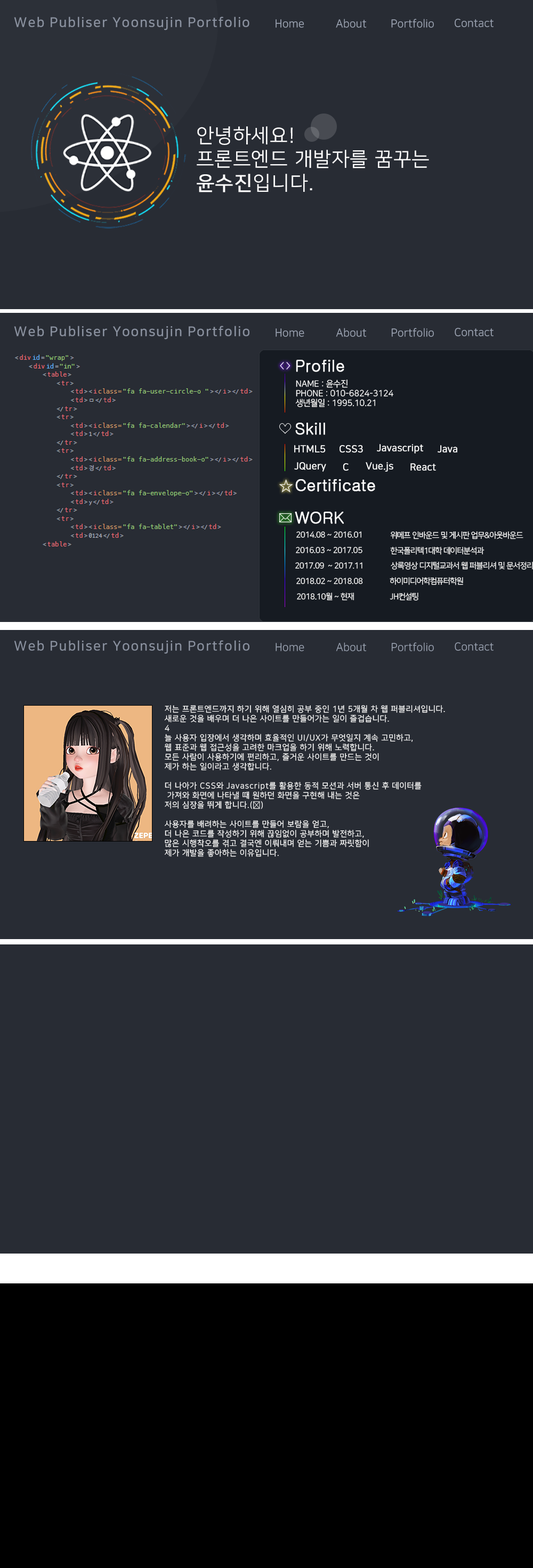
<style>
.page{position:relative;width:533px;height:1568px;background:#282c34}
.page>*{position:absolute;margin:0}
.t1{font:13.3px "NanumSquare_acB";letter-spacing:0.075em;color:#8a919f}
.t2{font:11.1px "NanumSquare_acR";color:#9da5b4}
.t3{font:19.7px "NanumSquare_acR";letter-spacing:0.075em;color:#ffffff}
.t4{font:19.7px "NanumSquare_acR";letter-spacing:0.075em;color:#ffffff;font-weight:bold}
.t5{font:16px "Gulim";color:#ffffff;font-weight:bold}
.t6{font:8.5px/9.6px "NanumSquare_acR";color:#ffffff}
.t7{font:9.6px "NanumSquare_acR";color:#ffffff;font-weight:bold}
.t8{font:16px "BinggraeMelona";color:#ffffff}
.t9{font:8px "NanumSquare_acR";letter-spacing:-0.025em;color:#ffffff}
.t10{font:8px "NanumSquare_acR";letter-spacing:0.075em;color:#ffffff}
</style>
<div class="page">
<p class="t1" style="left:14px;top:17px;width:235px;height:13px">Web Publiser Yoonsujin Portfolio</p>
<p class="t2" style="left:276px;top:19px;width:28px;height:9px">Home</p>
<p class="t2" style="left:336px;top:19px;width:30px;height:9px">About</p>
<p class="t2" style="left:391px;top:19px;width:43px;height:9px">Portfolio</p>
<p class="t2" style="left:455px;top:19px;width:39px;height:8px">Contact</p>
<p class="t3" style="left:197px;top:126px;width:232px;height:66px">안녕하세요!<br>프론트엔드 개발자를 꿈꾸는<br><span class="t4">윤수진</span>입니다.</p>
<p class="t1" style="left:14px;top:326px;width:235px;height:14px">Web Publiser Yoonsujin Portfolio</p>
<p class="t2" style="left:276px;top:328px;width:28px;height:9px">Home</p>
<p class="t2" style="left:336px;top:328px;width:30px;height:9px">About</p>
<p class="t2" style="left:391px;top:328px;width:43px;height:9px">Portfolio</p>
<p class="t2" style="left:455px;top:328px;width:39px;height:8px">Contact</p>
<p class="t5" style="left:296px;top:360px;width:48px;height:13px">Profile</p>
<p class="t6" style="left:295px;top:379px;width:98px;height:28px">NAME : 윤수진<br>PHONE : 010-6824-3124<br>생년월일 : 1995.10.21</p>
<p class="t5" style="left:295px;top:423px;width:30px;height:12px">Skill</p>
<p class="t7" style="left:294px;top:445px;width:32px;height:8px">HTML5</p>
<p class="t7" style="left:340px;top:445px;width:23px;height:8px">CSS3</p>
<p class="t7" style="left:377px;top:444px;width:46px;height:10px">Javascript</p>
<p class="t7" style="left:438px;top:445px;width:19px;height:8px">Java</p>
<p class="t7" style="left:294px;top:462px;width:32px;height:10px">JQuery</p>
<p class="t7" style="left:343px;top:463px;width:6px;height:8px">C</p>
<p class="t7" style="left:366px;top:462px;width:27px;height:10px">Vue.js</p>
<p class="t7" style="left:410px;top:463px;width:26px;height:8px">React</p>
<p class="t8" style="left:279px;top:479px;width:14px;height:13px">☆</p>
<p class="t5" style="left:295px;top:479px;width:80px;height:13px">Certificate</p>
<p class="t5" style="left:295px;top:512px;width:49px;height:12px">WORK</p>
<p class="t9" style="left:296px;top:531px;width:65px;height:7px">2014.08 ~ 2016.01</p>
<p class="t9" style="left:390px;top:531px;width:133px;height:8px">위메프 인바운드 및 게시판 업무&amp;아웃바운드</p>
<p class="t9" style="left:296px;top:547px;width:66px;height:6px">2016.03 ~ 2017.05</p>
<p class="t9" style="left:390px;top:547px;width:94px;height:8px">한국폴리텍1대학 데이터분석과</p>
<p class="t9" style="left:295px;top:562px;width:67px;height:7px">2017.09  ~ 2017.11</p>
<p class="t9" style="left:296px;top:578px;width:67px;height:6px">2018.02 ~ 2018.08</p>
<p class="t9" style="left:390px;top:577px;width:73px;height:8px">하이미디어학컴퓨터학원</p>
<p class="t9" style="left:297px;top:593px;width:57px;height:8px">2018.10월 ~ 현재</p>
<p class="t9" style="left:390px;top:593px;width:28px;height:8px">JH컨설팅</p>
<p class="t10" style="left:164px;top:705px;width:281px;height:152px">저는 프론트엔드까지 하기 위해 열심히 공부 중인 1년 5개월 차 웹 퍼블리셔입니다.<br>새로운 것을 배우며 더 나은 사이트를 만들어가는 일이 즐겁습니다.<br>4<br>늘 사용자 입장에서 생각하며 효율적인 UI/UX가 무엇일지 계속 고민하고,<br>웹 표준과 웹 접근성을 고려한 마크업을 하기 위해 노력합니다.<br>모든 사람이 사용하기에 편리하고, 즐거운 사이트를 만드는 것이<br>제가 하는 일이라고 생각합니다.<br><br>더 나아가 CSS와 Javascript를 활용한 동적 모션과 서버 통신 후 데이터를<br> 가져와 화면에 나타낼 때 원하던 화면을 구현해 내는 것은 <br>저의 심장을 뛰게 합니다.(💛)<br><br>사용자를 배려하는 사이트를 만들어 보람을 얻고,<br>더 나은 코드를 작성하기 위해 끊임없이 공부하며 발전하고,<br>많은 시행착오를 겪고 결국엔 이뤄내며 얻는 기쁨과 짜릿함이<br>제가 개발을 좋아하는 이유입니다.</p>
</div>
